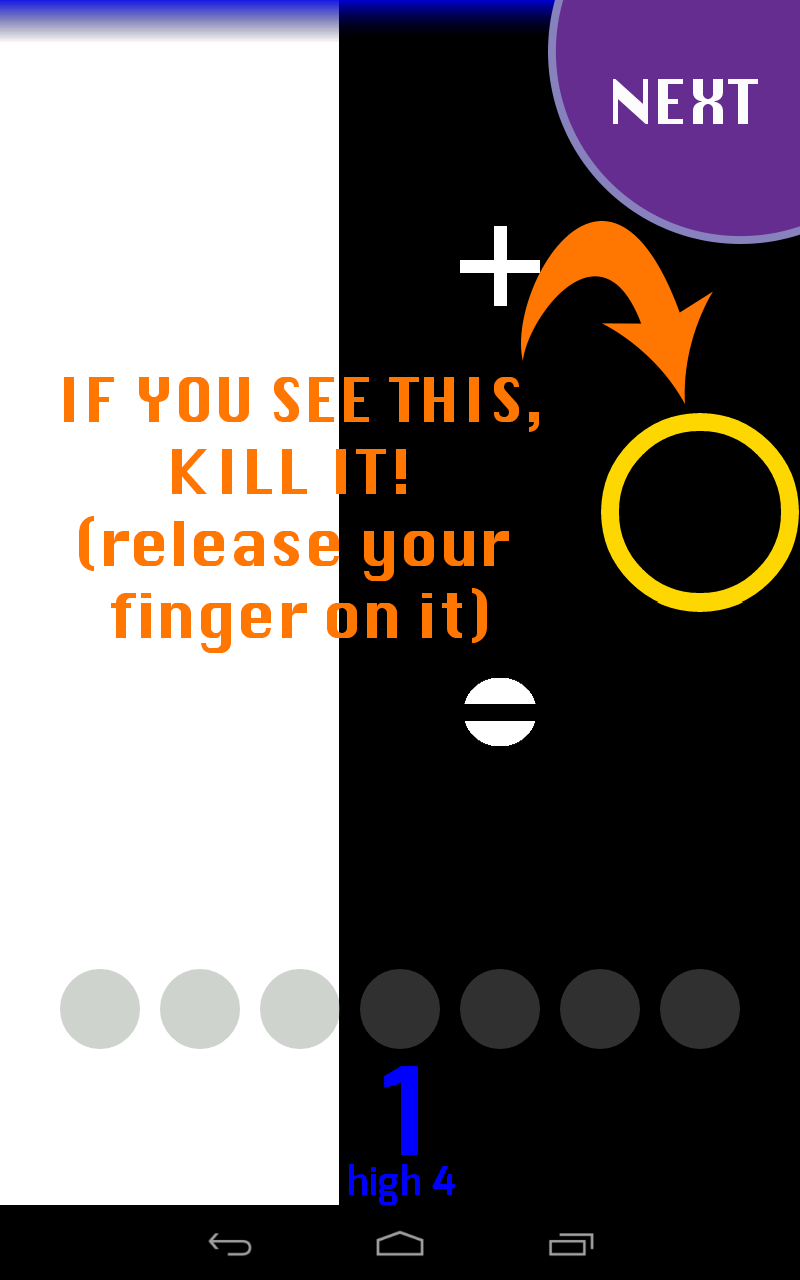
<style>
.page{position:relative;width:800px;height:1280px;background:#000000}
.page>*{position:absolute;margin:0}
.t1{font:60px "Silom";color:#fcfcfc}
.t2{font:60px "Silom";color:#ff7600}
</style>
<div class="page">
<p class="t1" style="left:613px;top:79px;width:145px;height:45px">NEXT</p>
<p class="t2" style="left:64px;top:377px;width:475px;height:276px;text-align:center">IF YOU SEE THIS,<br>KILL IT! <br>(release your <br>finger on it)</p>
</div>
